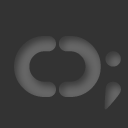
<style>
.page{position:relative;width:128px;height:128px;background:#333333}
.page>*{position:absolute;margin:0}
.t1{font:90px "PicoBlackAl";color:#5d5d5d}
</style>
<div class="page">
<p class="t1" style="left:14px;top:36px;width:107px;height:74px">();</p>
</div>
